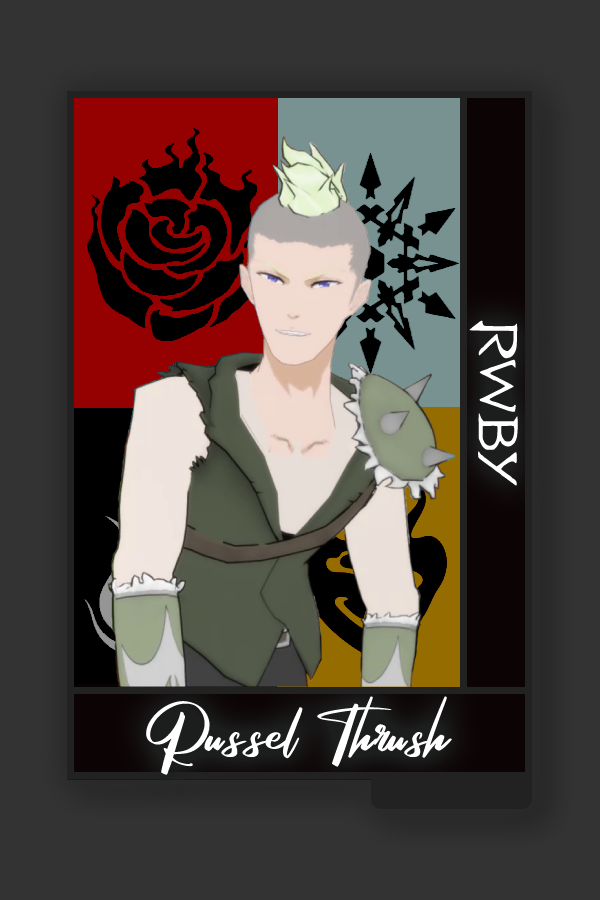
<style>
.page{position:relative;width:600px;height:900px;background:#333333}
.page>*{position:absolute;margin:0}
.t1{font:61.3px "RWBY_Style";color:#ffffff;scale:1.25 1}
.t2{font:76.6px "RosegaFREE";color:#ffffff;scale:0.91 1}
</style>
<div class="page">
<p class="t1" style="left:469px;top:320px;width:49px;height:166px;rotate:90deg">RWBY</p>
<p class="t2" style="left:145px;top:696px;width:307px;height:80px">Russel Thrush</p>
</div>
